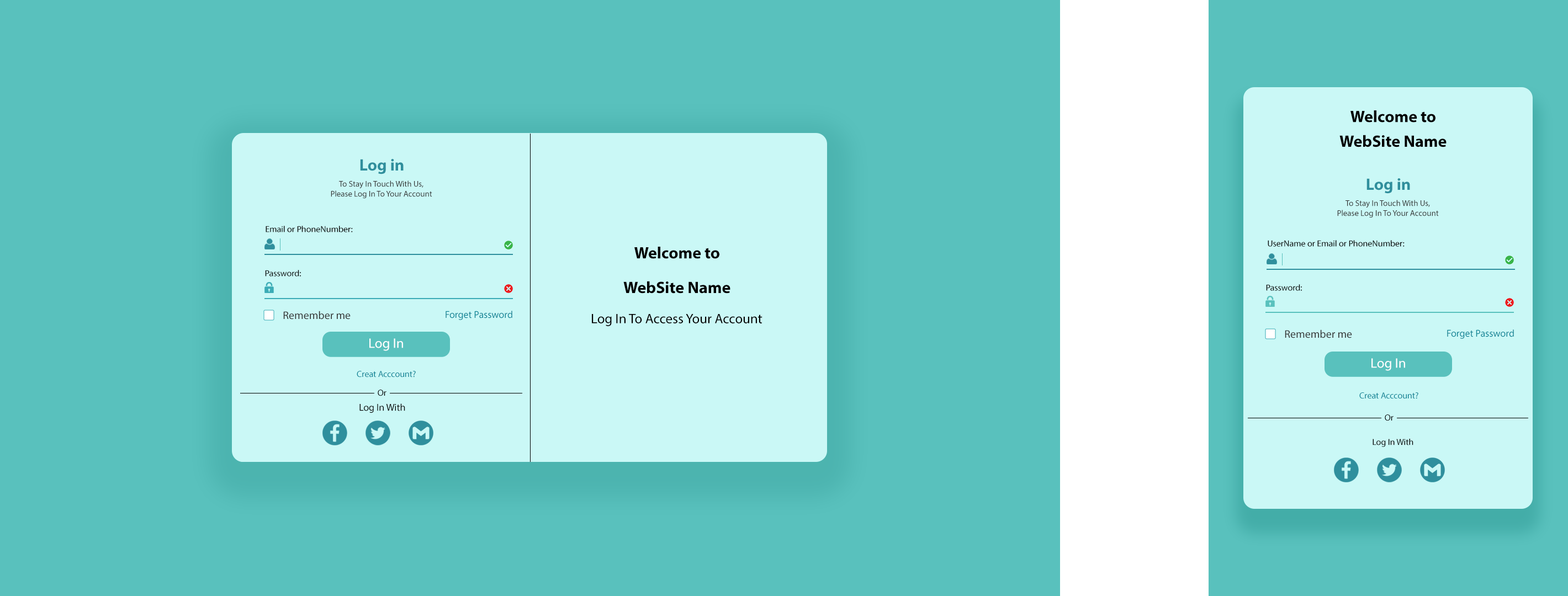
<style>
.page{position:relative;width:1568px;height:596px;background:#59c1bd}
.page>*{position:absolute;margin:0}
.t1{font:16.6px "MyriadPro-Bold";color:#000000}
.t2{font:16.6px "MyriadPro-Bold";color:#2f8f9d}
.t3{font:8.3px "MyriadPro-Regular";color:#303030}
.t4{font:8.8px "MyriadPro-Regular";color:#000000}
.t5{font:11px "MyriadPro-Regular";color:#333333}
.t6{font:9.9px "MyriadPro-Regular";color:#0b8496}
.t7{font:13.8px "MyriadPro-Regular";color:#000000}
.t8{font:13.8px "MyriadPro-Regular";color:#ffffff}
.t9{font:8.8px "MyriadPro-Regular";color:#0b8496}
.t10{font:9.9px "MyriadPro-Regular";color:#000000}
</style>
<div class="page">
<p class="t1" style="left:1350px;top:110px;width:85px;height:13px">Welcome to</p>
<p class="t1" style="left:1339px;top:135px;width:108px;height:12px">WebSite Name</p>
<p class="t2" style="left:360px;top:159px;width:44px;height:15px">Log in</p>
<p class="t3" style="left:331px;top:181px;width:101px;height:18px;text-align:center">To Stay In Touch With Us,<br>Please Log In To Your Account</p>
<p class="t2" style="left:1366px;top:178px;width:44px;height:16px">Log in</p>
<p class="t3" style="left:1337px;top:200px;width:102px;height:18px;text-align:center">To Stay In Touch With Us,<br>Please Log In To Your Account</p>
<p class="t4" style="left:266px;top:226px;width:87px;height:6px">Email or PhoneNumber:</p>
<p class="t4" style="left:1268px;top:240px;width:137px;height:7px">UserName or Email or PhoneNumber:</p>
<p class="t1" style="left:634px;top:247px;width:85px;height:12px">Welcome to</p>
<p class="t4" style="left:265px;top:270px;width:36px;height:7px">Password:</p>
<p class="t1" style="left:623px;top:281px;width:107px;height:13px">WebSite Name</p>
<p class="t4" style="left:1266px;top:284px;width:36px;height:7px">Password:</p>
<p class="t5" style="left:283px;top:311px;width:68px;height:9px">Remember me</p>
<p class="t6" style="left:446px;top:311px;width:66px;height:9px">Forget Password</p>
<p class="t7" style="left:592px;top:314px;width:170px;height:12px">Log In To Access Your Account</p>
<p class="t5" style="left:1285px;top:330px;width:67px;height:8px">Remember me</p>
<p class="t6" style="left:1447px;top:330px;width:67px;height:9px">Forget Password</p>
<p class="t8" style="left:369px;top:338px;width:34px;height:13px">Log In</p>
<p class="t8" style="left:1371px;top:358px;width:34px;height:13px">Log In</p>
<p class="t9" style="left:357px;top:371px;width:59px;height:7px">Creat Acccount?</p>
<p class="t4" style="left:378px;top:390px;width:8px;height:6px">Or</p>
<p class="t9" style="left:1359px;top:393px;width:59px;height:6px">Creat Acccount?</p>
<p class="t10" style="left:359px;top:404px;width:46px;height:9px">Log In With</p>
<p class="t4" style="left:1385px;top:415px;width:9px;height:6px">Or</p>
<p class="t4" style="left:1373px;top:439px;width:40px;height:8px">Log In With</p>
</div>
